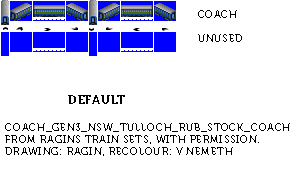
<style>
.page{position:relative;width:300px;height:174px;background:#ffffff}
.page>*{position:absolute;margin:0}
.t1{font:10px "Museo700-Regular";letter-spacing:0.075em;color:#000000;text-transform:uppercase}
.t2{font:12px "Museo700-Regular";letter-spacing:0.075em;color:#000000;text-transform:uppercase}
</style>
<div class="page">
<p class="t1" style="left:198px;top:10px;width:44px;height:32px">coach<br><br>unused</p>
<p class="t2" style="left:68px;top:95px;width:57px;height:9px">DEFAULT</p>
<p class="t1" style="left:5px;top:123px;width:285px;height:33px">Coach_Gen3_NSW_Tulloch_RUB_Stock_Coach<br>From Ragins Train Sets, with permission.<br>Drawing: Ragin, recolour: V Nemeth</p>
</div>
